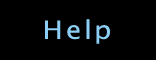
<style>
.page{position:relative;width:156px;height:60px;background:#000000}
.page>*{position:absolute;margin:0}
.t1{font:25px "LucidaSansUnicode";letter-spacing:0.26em;color:#8dcff4;scale:1.11 1}
</style>
<div class="page">
<p class="t1" style="left:45px;top:19px;width:65px;height:25px">Help</p>
</div>
